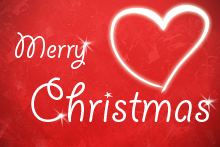
<style>
.page{position:relative;width:220px;height:147px}
.page>*{position:absolute;margin:0}
.t1{font:36px "GiddyupStd";color:#ffffff}
.t2{font:60px "GiddyupStd";color:#ffffff}
</style>
<div class="page">
<p class="t1" style="left:15px;top:32px;width:70px;height:37px">Merry</p>
<p class="t2" style="left:31px;top:77px;width:179px;height:45px">Christmas</p>
</div>
